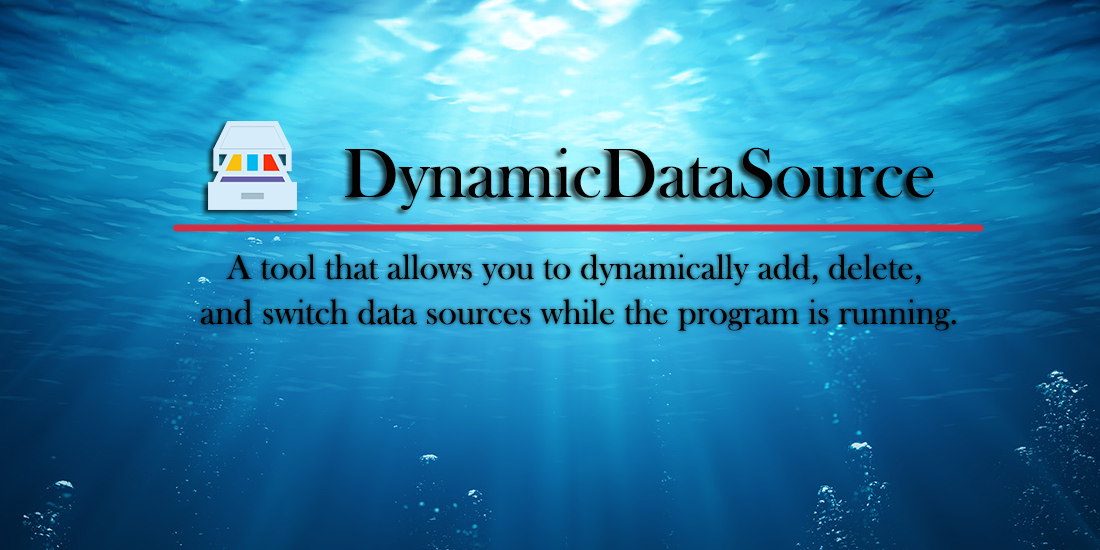
<style>
.page{position:relative;width:1100px;height:550px}
.page>*{position:absolute;margin:0}
.t1{font:72px "BaskOldFace";color:#040101}
.t2{font:36px/45px "BaskOldFace";color:#040101}
</style>
<div class="page">
<p class="t1" style="left:345px;top:147px;width:589px;height:63px">DynamicDataSource</p>
<p class="t2" style="left:200px;top:254px;width:756px;height:77px;text-align:center">A tool that allows you to dynamically add, delete, <br>and switch data sources while the program is running.</p>
</div>
